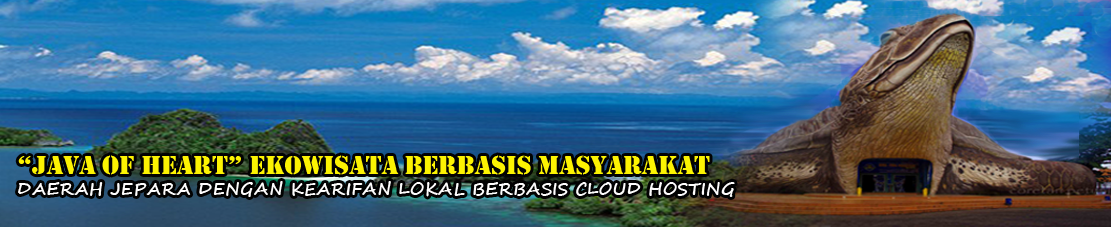
<style>
.page{position:relative;width:1111px;height:227px}
.page>*{position:absolute;margin:0}
.t1{font:17.3px "SegoeScript-Bold";color:#fefdfd}
.t2{font:26.7px "Stencil";color:#fcf302}
</style>
<div class="page">
<p class="t1" style="left:18px;top:155px;width:717px;height:42px"><span class="t2">“JAVA OF HEART” EKOWISATA BERBASIS MASYARAKAT <br></span>DAERAH JEPARA DENGAN KEARIFAN LOKAL BERBASIS CLOUD HOSTING</p>
</div>
